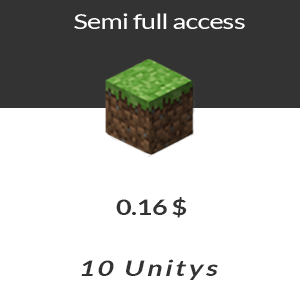
<style>
.page{position:relative;width:300px;height:304px;background:#ffffff}
.page>*{position:absolute;margin:0}
.t1{font:21.3px "Lato-Regular";letter-spacing:-0.025em;color:#ffffff;scale:1.26 1}
.t2{font:21.6px "Lato-Bold";letter-spacing:-0.025em;color:#333333;scale:1.26 1}
.t3{font:21.6px "Lato-Bold";letter-spacing:0.1em;color:#333333;font-style:italic;scale:1.26 1}
</style>
<div class="page">
<p class="t1" style="left:74px;top:13px;width:171px;height:16px">Semi full access</p>
<p class="t2" style="left:116px;top:197px;width:71px;height:21px">0.16 $</p>
<p class="t3" style="left:81px;top:259px;width:137px;height:21px">10 Unitys</p>
</div>
